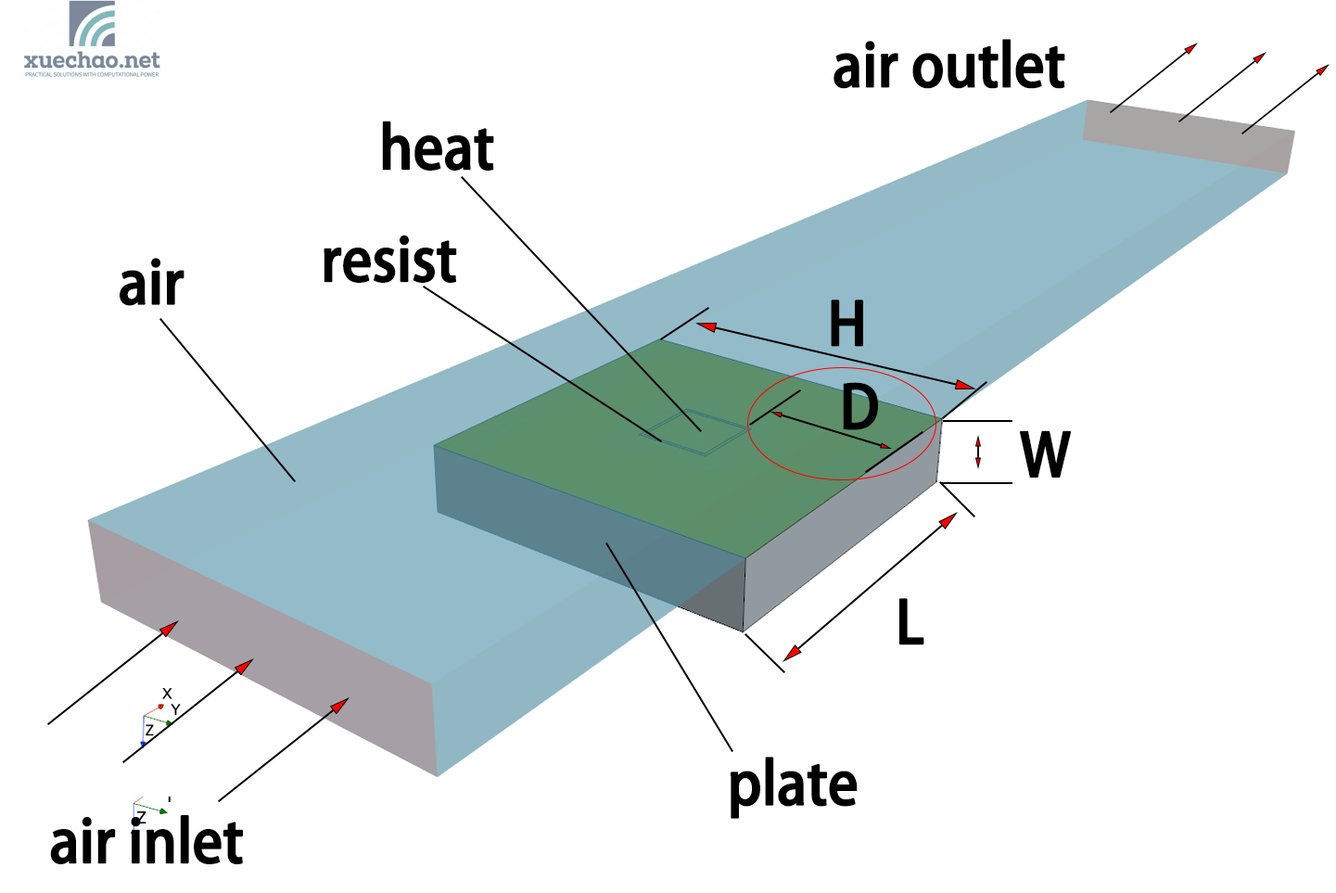
<style>
.page{position:relative;width:1336px;height:893px;background:#ffffff}
.page>*{position:absolute;margin:0}
.t1{font:58.4px "AdobeHeitiStd-Regular";letter-spacing:-0.02em;color:#000000;font-weight:bold;scale:0.95 1}
</style>
<div class="page">
<p class="t1" style="left:833px;top:39px;width:232px;height:50px">air outlet</p>
<p class="t1" style="left:382px;top:121px;width:112px;height:50px">heat</p>
<p class="t1" style="left:324px;top:235px;width:133px;height:48px">resist</p>
<p class="t1" style="left:120px;top:258px;width:64px;height:48px">air</p>
<p class="t1" style="left:831px;top:299px;width:32px;height:48px">H</p>
<p class="t1" style="left:843px;top:382px;width:35px;height:48px">D</p>
<p class="t1" style="left:1019px;top:430px;width:53px;height:47px">W</p>
<p class="t1" style="left:899px;top:598px;width:25px;height:47px">L</p>
<p class="t1" style="left:730px;top:756px;width:127px;height:63px">plate</p>
<p class="t1" style="left:50px;top:815px;width:193px;height:49px">air inlet</p>
</div>
